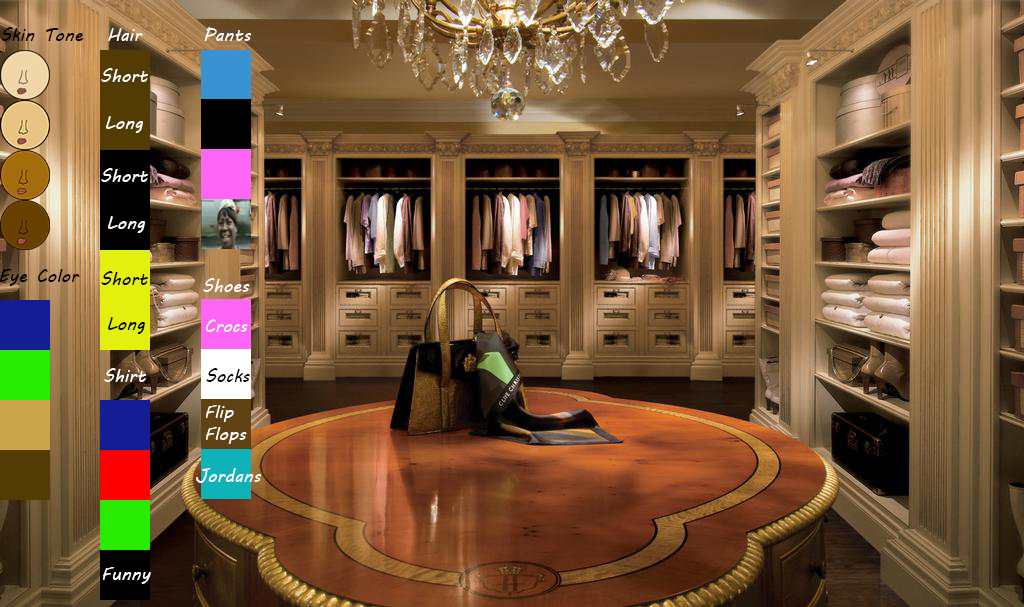
<style>
.page{position:relative;width:1024px;height:607px}
.page>*{position:absolute;margin:0}
.t1{font:18px "MVBoli";color:#000000}
.t2{font:18px "MVBoli";color:#ffffff}
</style>
<div class="page">
<p class="t1" style="left:1px;top:27px;width:83px;height:14px">Skin Tone</p>
<p class="t2" style="left:108px;top:28px;width:35px;height:13px">Hair</p>
<p class="t2" style="left:204px;top:27px;width:48px;height:14px">Pants</p>
<p class="t2" style="left:101px;top:68px;width:47px;height:14px">Short</p>
<p class="t2" style="left:106px;top:116px;width:37px;height:17px">Long</p>
<p class="t2" style="left:101px;top:168px;width:47px;height:14px">Short</p>
<p class="t2" style="left:108px;top:216px;width:37px;height:17px">Long</p>
<p class="t1" style="left:0px;top:269px;width:80px;height:17px">Eye Color</p>
<p class="t1" style="left:101px;top:271px;width:47px;height:14px">Short</p>
<p class="t2" style="left:203px;top:278px;width:47px;height:14px">Shoes</p>
<p class="t1" style="left:108px;top:317px;width:37px;height:17px">Long</p>
<p class="t2" style="left:206px;top:319px;width:42px;height:13px">Crocs</p>
<p class="t2" style="left:104px;top:368px;width:42px;height:14px">Shirt</p>
<p class="t1" style="left:206px;top:368px;width:44px;height:14px">Socks</p>
<p class="t2" style="left:206px;top:405px;width:41px;height:39px">Flip<br>Flops</p>
<p class="t2" style="left:196px;top:468px;width:66px;height:15px">Jordans</p>
<p class="t2" style="left:103px;top:567px;width:48px;height:17px">Funny</p>
</div>
